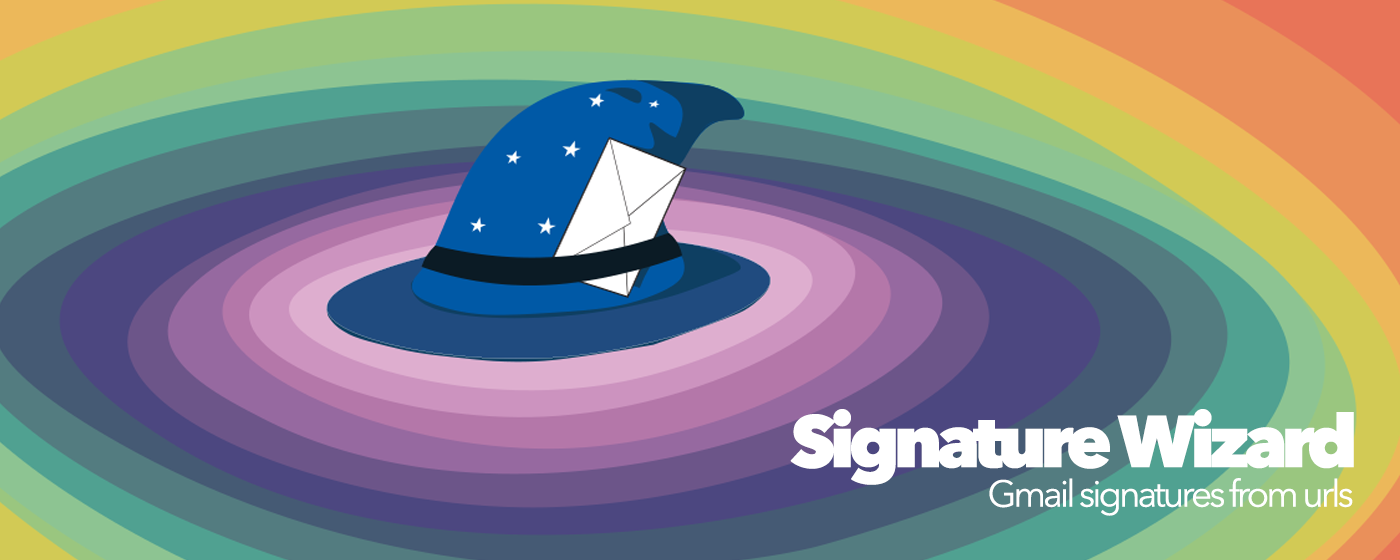
<style>
.page{position:relative;width:1400px;height:560px}
.page>*{position:absolute;margin:0}
.t1{font:73px "AvenirNext-Heavy";letter-spacing:-0.08em;color:#ffffff}
.t2{font:37px "AvenirNext-Regular";letter-spacing:-0.08em;color:#ffffff}
</style>
<div class="page">
<p class="t1" style="left:790px;top:409px;width:564px;height:76px">Signature Wizard</p>
<p class="t2" style="left:989px;top:478px;width:364px;height:38px">Gmail signatures from urls</p>
</div>
